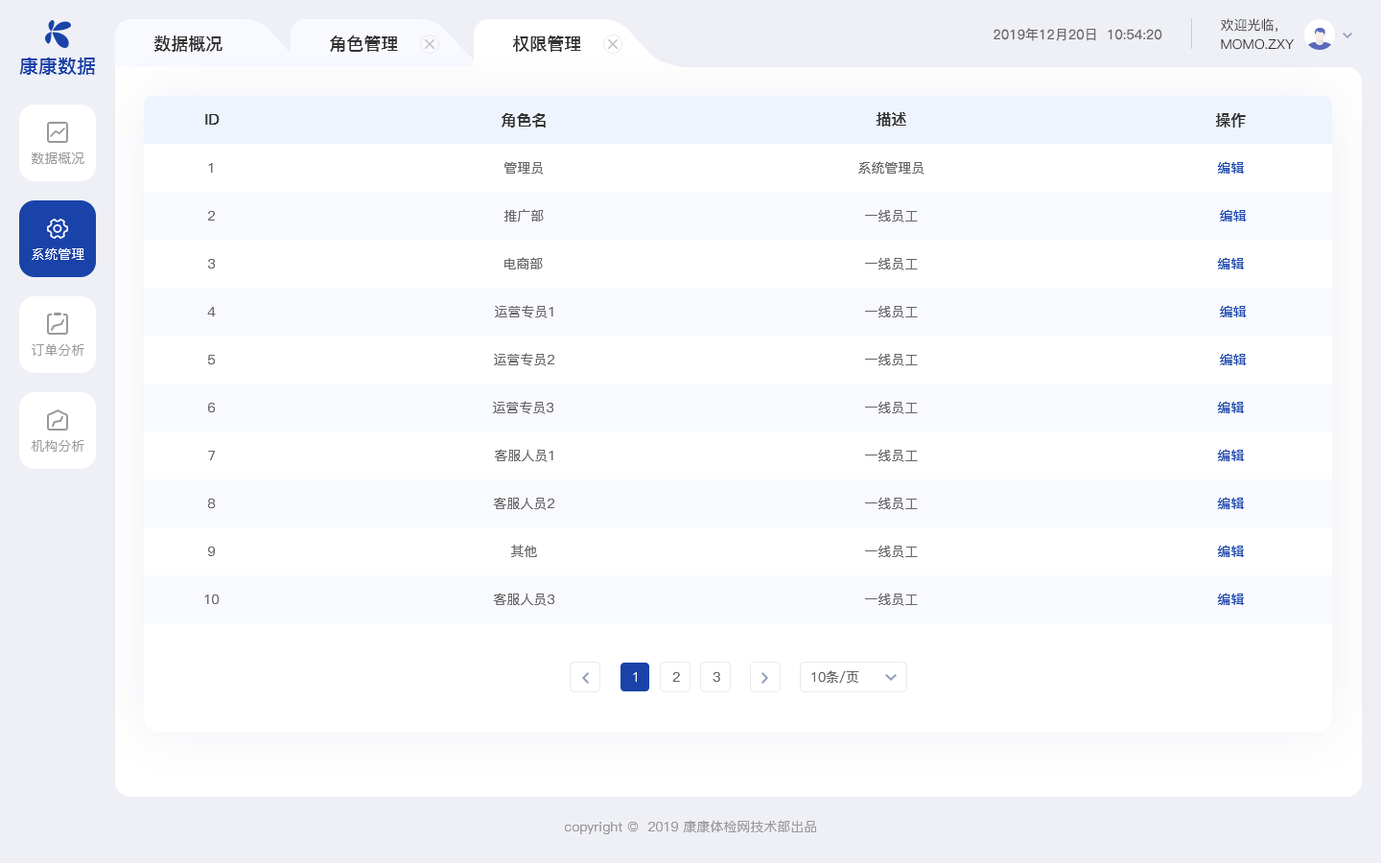
<style>
.page{position:relative;width:1381px;height:863px;background:#ffffff}
.page>*{position:absolute;margin:0}
.t1{font:13.4px "PingFang-SC-Regular";color:#666666}
.t2{font:13.4px "PingFang-SC-Medium";color:#333333;text-transform:uppercase}
.t3{font:17.3px "PingFang-SC-Bold";color:#333333;text-transform:uppercase}
.t4{font:19.2px "PingFangSC-Medium";color:#1a43a9;text-transform:uppercase}
.t5{font:15.3px "PingFang-SC-Bold";color:#333333;text-transform:uppercase}
.t6{font:13.4px "PingFang-SC-Medium";color:#999999;text-transform:uppercase}
.t7{font:13.4px "PingFang-SC-Medium";color:#666666;text-transform:uppercase}
.t8{font:13.4px "PingFang-SC-Medium";color:#1a43a9;text-transform:uppercase}
.t9{font:13.4px "PingFang-SC-Medium";color:#ffffff;text-transform:uppercase}
.t10{font:13.4px "PingFang-SC-Medium";color:#999999}
</style>
<div class="page">
<p class="t1" style="left:994px;top:28px;width:169px;height:13px">2019年12月20日  10:54:20</p>
<p class="t2" style="left:1221px;top:18px;width:57px;height:15px">欢迎光临，</p>
<p class="t3" style="left:154px;top:35px;width:69px;height:17px">数据概况</p>
<p class="t3" style="left:330px;top:35px;width:68px;height:17px">角色管理</p>
<p class="t3" style="left:513px;top:35px;width:68px;height:17px">权限管理</p>
<p class="t2" style="left:1221px;top:38px;width:73px;height:12px">momo.zxy</p>
<p class="t4" style="left:19px;top:57px;width:76px;height:18px">康康数据</p>
<p class="t5" style="left:502px;top:113px;width:44px;height:15px">角色名</p>
<p class="t5" style="left:876px;top:112px;width:30px;height:15px">描述</p>
<p class="t5" style="left:1216px;top:113px;width:30px;height:15px">操作</p>
<p class="t5" style="left:205px;top:114px;width:15px;height:11px">ID</p>
<p class="t6" style="left:32px;top:153px;width:52px;height:11px">数据概况</p>
<p class="t7" style="left:505px;top:161px;width:39px;height:14px">管理员</p>
<p class="t7" style="left:858px;top:161px;width:67px;height:14px">系统管理员</p>
<p class="t8" style="left:1217px;top:161px;width:27px;height:13px">编辑</p>
<p class="t7" style="left:208px;top:163px;width:5px;height:10px">1</p>
<p class="t7" style="left:504px;top:209px;width:40px;height:14px">推广部</p>
<p class="t7" style="left:865px;top:209px;width:53px;height:14px">一线员工</p>
<p class="t8" style="left:1220px;top:209px;width:27px;height:13px">编辑</p>
<p class="t7" style="left:208px;top:211px;width:7px;height:10px">2</p>
<p class="t9" style="left:32px;top:247px;width:52px;height:13px">系统管理</p>
<p class="t7" style="left:505px;top:257px;width:38px;height:13px">电商部</p>
<p class="t7" style="left:865px;top:257px;width:53px;height:13px">一线员工</p>
<p class="t8" style="left:1217px;top:257px;width:27px;height:13px">编辑</p>
<p class="t7" style="left:208px;top:259px;width:7px;height:10px">3</p>
<p class="t7" style="left:495px;top:305px;width:58px;height:13px">运营专员1</p>
<p class="t7" style="left:865px;top:305px;width:53px;height:13px">一线员工</p>
<p class="t8" style="left:1220px;top:305px;width:27px;height:12px">编辑</p>
<p class="t7" style="left:207px;top:307px;width:9px;height:10px">4</p>
<p class="t6" style="left:32px;top:343px;width:52px;height:13px">订单分析</p>
<p class="t7" style="left:494px;top:353px;width:60px;height:13px">运营专员2</p>
<p class="t7" style="left:865px;top:353px;width:53px;height:13px">一线员工</p>
<p class="t8" style="left:1220px;top:353px;width:27px;height:12px">编辑</p>
<p class="t7" style="left:208px;top:355px;width:7px;height:10px">5</p>
<p class="t7" style="left:493px;top:401px;width:60px;height:13px">运营专员3</p>
<p class="t7" style="left:865px;top:401px;width:53px;height:13px">一线员工</p>
<p class="t8" style="left:1217px;top:401px;width:27px;height:12px">编辑</p>
<p class="t7" style="left:208px;top:403px;width:7px;height:9px">6</p>
<p class="t6" style="left:31px;top:440px;width:53px;height:12px">机构分析</p>
<p class="t7" style="left:494px;top:449px;width:59px;height:13px">客服人员1</p>
<p class="t7" style="left:865px;top:449px;width:53px;height:13px">一线员工</p>
<p class="t8" style="left:1217px;top:449px;width:27px;height:12px">编辑</p>
<p class="t7" style="left:208px;top:451px;width:7px;height:9px">7</p>
<p class="t7" style="left:493px;top:497px;width:61px;height:13px">客服人员2</p>
<p class="t7" style="left:865px;top:497px;width:53px;height:13px">一线员工</p>
<p class="t8" style="left:1217px;top:497px;width:27px;height:12px">编辑</p>
<p class="t7" style="left:208px;top:499px;width:8px;height:9px">8</p>
<p class="t7" style="left:511px;top:545px;width:26px;height:12px">其他</p>
<p class="t7" style="left:865px;top:545px;width:53px;height:13px">一线员工</p>
<p class="t8" style="left:1217px;top:545px;width:27px;height:12px">编辑</p>
<p class="t7" style="left:208px;top:547px;width:7px;height:9px">9</p>
<p class="t7" style="left:493px;top:593px;width:61px;height:13px">客服人员3</p>
<p class="t7" style="left:865px;top:593px;width:53px;height:13px">一线员工</p>
<p class="t8" style="left:1217px;top:593px;width:27px;height:12px">编辑</p>
<p class="t7" style="left:204px;top:595px;width:15px;height:9px">10</p>
<p class="t9" style="left:633px;top:672px;width:4px;height:10px">1</p>
<p class="t7" style="left:672px;top:672px;width:8px;height:10px">2</p>
<p class="t7" style="left:713px;top:672px;width:7px;height:10px">3</p>
<p class="t7" style="left:811px;top:670px;width:48px;height:13px">10条/页</p>
<p class="t10" style="left:565px;top:820px;width:251px;height:15px">copyright ©  2019 康康体检网技术部出品</p>
</div>
